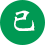
<style>
.page{position:relative;width:45px;height:45px;background:#009953}
.page>*{position:absolute;margin:0}
.t1{font:30px "GBWeiBei-Bold";color:#ffffff}
</style>
<div class="page">
<p class="t1" style="left:14px;top:10px;width:21px;height:21px">已</p>
</div>
